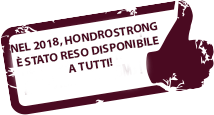
<style>
.page{position:relative;width:214px;height:115px;background:#ffffff}
.page>*{position:absolute;margin:0}
.t1{font:12px "MyriadPro-Bold";color:#4a0a21}
</style>
<div class="page">
<p class="t1" style="left:10px;top:21px;width:149px;height:52px;text-align:center;rotate:-9deg">NEL 2018, HONDROSTRONG <br>È STATO RESO DISPONIBILE<br> A TUTTI!</p>
</div>
